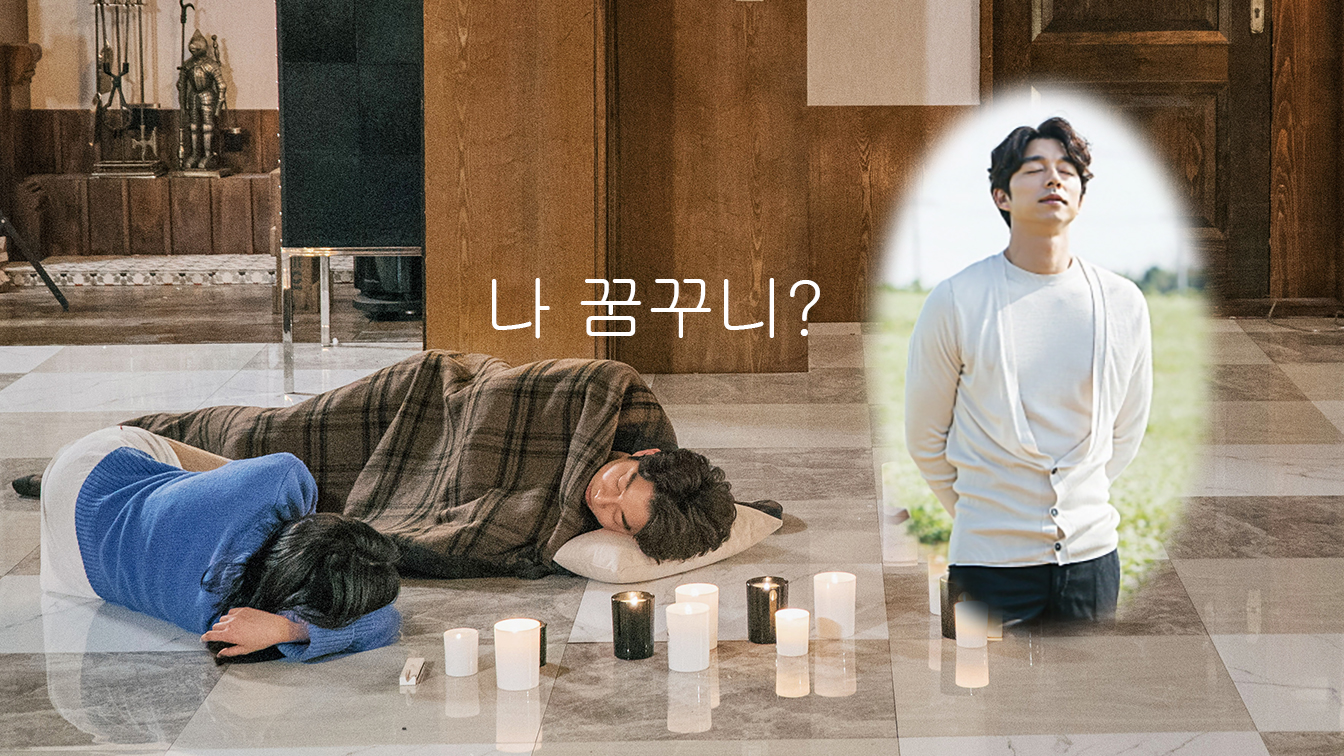
<style>
.page{position:relative;width:1344px;height:756px}
.page>*{position:absolute;margin:0}
.t1{font:73.7px "Gulim";letter-spacing:-0.045em;color:#fffefe}
</style>
<div class="page">
<p class="t1" style="left:492px;top:278px;width:328px;height:61px">나 꿈꾸니?</p>
</div>
